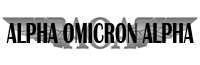
<style>
.page{position:relative;width:200px;height:65px;background:#ffffff}
.page>*{position:absolute;margin:0}
.t1{font:30px "BritannicBold";letter-spacing:-0.005em;color:#000000;scale:0.6 1}
</style>
<div class="page">
<p class="t1" style="left:6px;top:23px;width:188px;height:20px">ALPHA OMICRON ALPHA</p>
</div>
